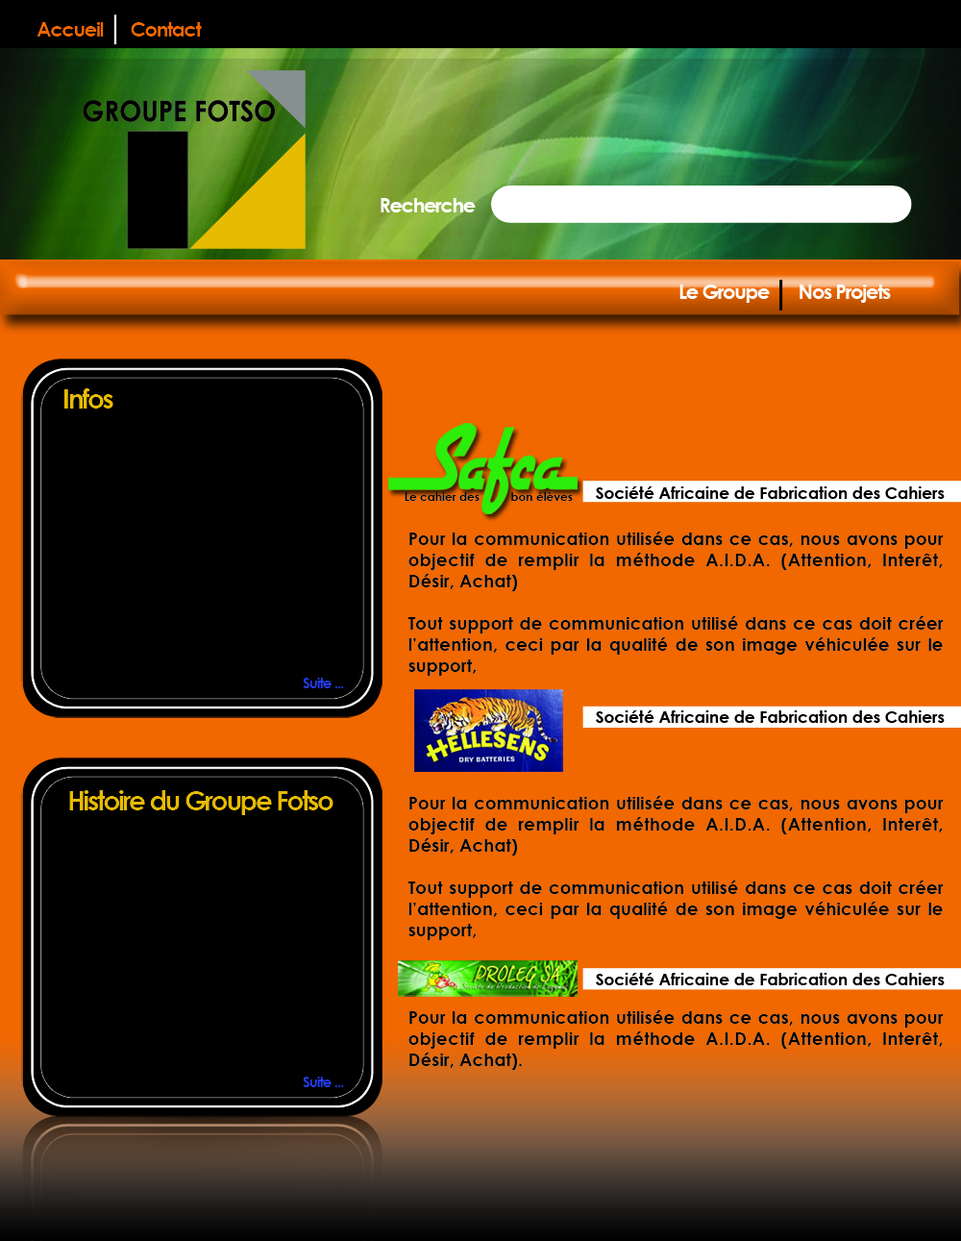
<style>
.page{position:relative;width:961px;height:1241px;background:#f16700}
.page>*{position:absolute;margin:0}
.t1{font:20.6px "CenturyGothic-Bold";letter-spacing:-0.075em;color:#f16700}
.t2{font:28.5px "CenturyGothic-Bold";color:#000000;scale:0.93 1}
.t3{font:20.6px "CenturyGothic-Bold";letter-spacing:-0.075em;color:#ffffff}
.t4{font:26.5px "CenturyGothic-Bold";letter-spacing:-0.075em;color:#e6bb02}
.t5{font:11.6px "CenturyGothic-Bold";color:#000000}
.t6{font:16.2px "CenturyGothic-Bold";color:#000000}
.t7{font:17.7px "CenturyGothic-Bold";color:#000000}
.t8{font:14.7px "CenturyGothic-Bold";letter-spacing:-0.075em;color:#253eff}
</style>
<div class="page">
<p class="t1" style="left:37px;top:22px;width:67px;height:15px">Accueil</p>
<p class="t1" style="left:131px;top:22px;width:71px;height:15px">Contact</p>
<p class="t2" style="left:83px;top:100px;width:192px;height:22px">GROUPE FOTSO</p>
<p class="t3" style="left:381px;top:198px;width:95px;height:14px">Recherche</p>
<p class="t3" style="left:679px;top:284px;width:91px;height:19px">Le Groupe</p>
<p class="t3" style="left:800px;top:284px;width:91px;height:19px">Nos Projets</p>
<p class="t4" style="left:64px;top:388px;width:49px;height:20px">Infos</p>
<p class="t5" style="left:405px;top:492px;width:75px;height:9px">Le cahier des</p>
<p class="t5" style="left:511px;top:492px;width:62px;height:9px">bon élèves</p>
<p class="t6" style="left:596px;top:486px;width:349px;height:13px">Société Africaine de Fabrication des Cahiers</p>
<p class="t7" style="left:407px;top:531px;width:537px;height:145px;text-align:justify">Pour la communication utilisée dans ce cas, nous avons pour objectif de remplir la méthode A.I.D.A. (Attention, Interêt, Désir, Achat)<br><br>Tout support de communication utilisé dans ce cas doit créer l’attention, ceci par la qualité de son image véhiculée sur le support,</p>
<p class="t8" style="left:303px;top:678px;width:41px;height:10px">Suite ...</p>
<p class="t6" style="left:596px;top:710px;width:349px;height:13px">Société Africaine de Fabrication des Cahiers</p>
<p class="t4" style="left:69px;top:790px;width:264px;height:25px">Histoire du Groupe Fotso</p>
<p class="t7" style="left:407px;top:796px;width:537px;height:144px;text-align:justify">Pour la communication utilisée dans ce cas, nous avons pour objectif de remplir la méthode A.I.D.A. (Attention, Interêt, Désir, Achat)<br><br>Tout support de communication utilisé dans ce cas doit créer l’attention, ceci par la qualité de son image véhiculée sur le support,</p>
<p class="t6" style="left:596px;top:973px;width:349px;height:12px">Société Africaine de Fabrication des Cahiers</p>
<p class="t7" style="left:408px;top:1010px;width:536px;height:60px;text-align:justify">Pour la communication utilisée dans ce cas, nous avons pour objectif de remplir la méthode A.I.D.A. (Attention, Interêt, Désir, Achat).</p>
<p class="t8" style="left:303px;top:1076px;width:41px;height:11px">Suite ...</p>
</div>
